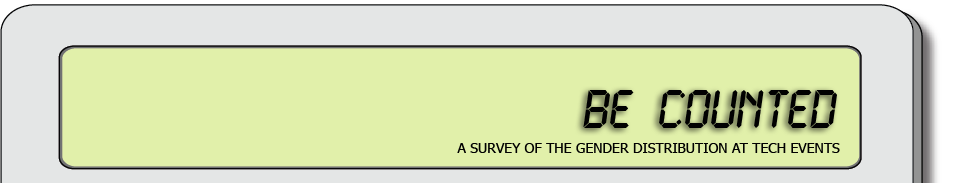
<style>
.page{position:relative;width:960px;height:183px;background:#e1f0aa}
.page>*{position:absolute;margin:0}
.t1{font:48px "LCD2Bold";color:#010101}
.t2{font:14px "Tahoma";color:#010101}
</style>
<div class="page">
<p class="t1" style="left:583px;top:90px;width:254px;height:38px">be counted</p>
<p class="t2" style="left:457px;top:143px;width:383px;height:10px">A SURVEY OF THE GENDER DISTRIBUTION AT TECH EVENTS</p>
</div>
